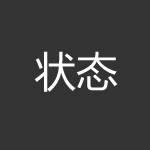
<style>
.page{position:relative;width:150px;height:150px;background:#333333}
.page>*{position:absolute;margin:0}
.t1{font:41.7px "MicrosoftYaHei";color:#ffffff}
</style>
<div class="page">
<p class="t1" style="left:34px;top:51px;width:84px;height:41px">状态</p>
</div>
